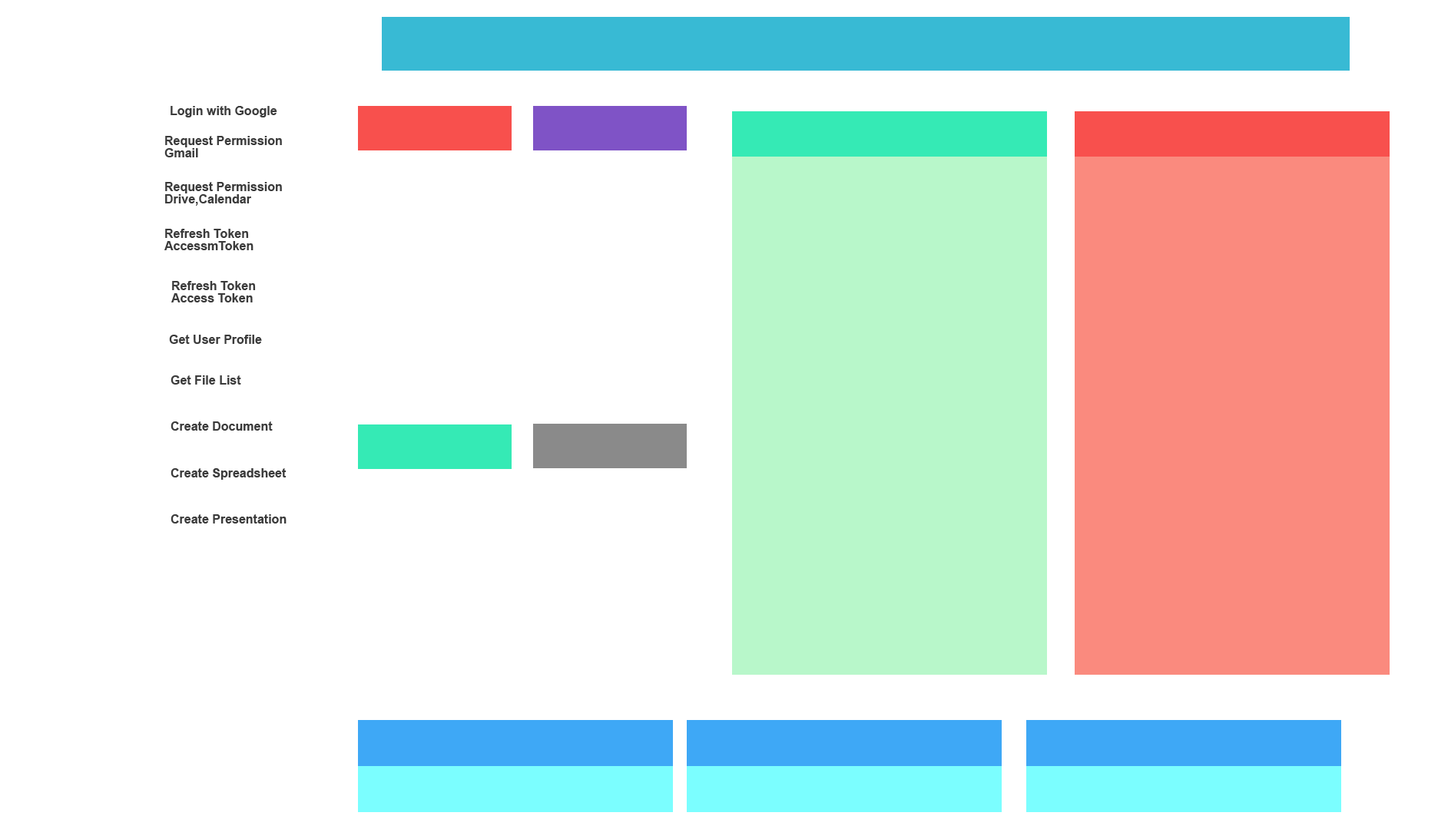
<style>
.page{position:relative;width:1438px;height:829px;background:#ffffff}
.page>*{position:absolute;margin:0}
.t1{font:12.3px "Arial-BoldMT";color:#3b3b3b}
.t2{font:12.3px/12.3px "Arial-BoldMT";color:#3b3b3b}
</style>
<div class="page">
<p class="t1" style="left:170px;top:106px;width:107px;height:12px">Login with Google</p>
<p class="t2" style="left:164px;top:136px;width:118px;height:21px">Request Permission <br>Gmail</p>
<p class="t2" style="left:165px;top:182px;width:117px;height:24px">Request Permission <br>Drive,Calendar</p>
<p class="t2" style="left:164px;top:229px;width:89px;height:21px">Refresh Token<br>AccessmToken</p>
<p class="t2" style="left:171px;top:281px;width:85px;height:22px">Refresh Token<br>Access Token</p>
<p class="t1" style="left:169px;top:335px;width:93px;height:9px">Get User Profile</p>
<p class="t1" style="left:170px;top:376px;width:71px;height:9px">Get File List</p>
<p class="t1" style="left:170px;top:422px;width:103px;height:9px">Create Document</p>
<p class="t1" style="left:170px;top:468px;width:116px;height:12px">Create Spreadsheet</p>
<p class="t1" style="left:170px;top:515px;width:116px;height:9px">Create Presentation</p>
</div>
